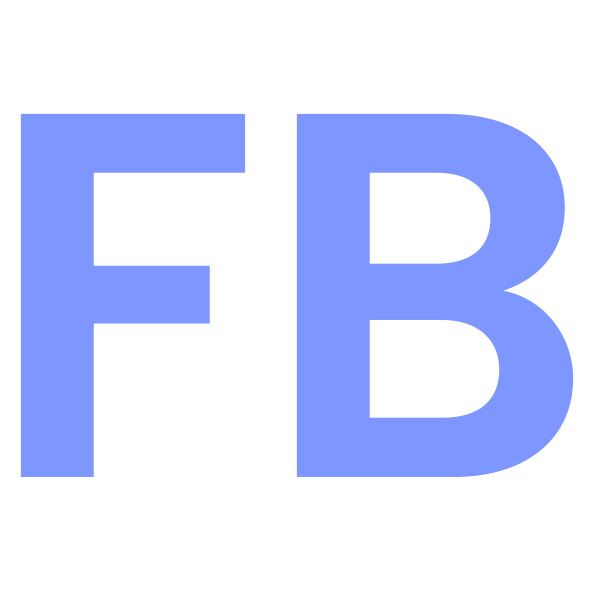
<style>
.page{position:relative;width:591px;height:591px;background:#ffffff}
.page>*{position:absolute;margin:0}
.t1{font:520.2px "Poppins-SemiBold";color:#7e96ff}
</style>
<div class="page">
<p class="t1" style="left:20px;top:113px;width:554px;height:364px">FB</p>
</div>
